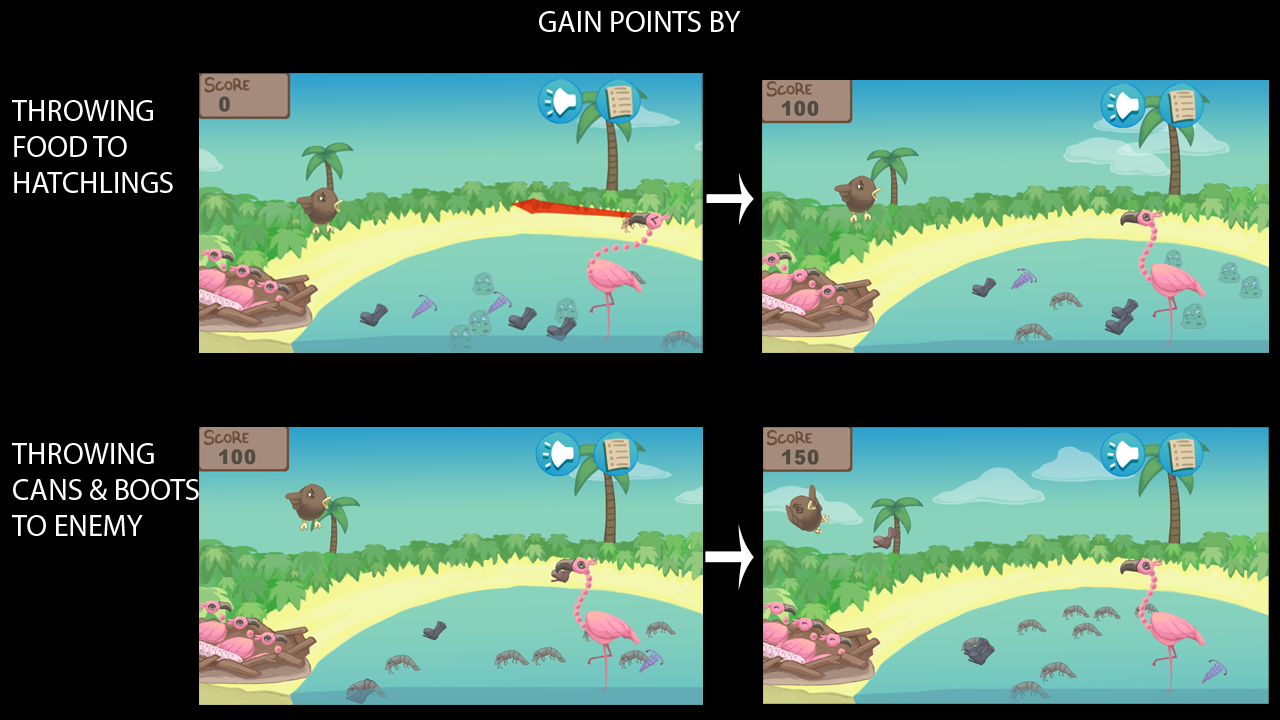
<style>
.page{position:relative;width:1280px;height:720px;background:#000000}
.page>*{position:absolute;margin:0}
.t1{font:30px "MyriadPro-Regular";color:#ffffff}
</style>
<div class="page">
<p class="t1" style="left:539px;top:11px;width:202px;height:21px">GAIN POINTS BY</p>
<p class="t1" style="left:12px;top:100px;width:161px;height:93px">THROWING <br>FOOD TO <br>HATCHLINGS</p>
<p class="t1" style="left:12px;top:443px;width:187px;height:93px">THROWING<br>CANS &amp; BOOTS<br>TO ENEMY</p>
</div>
